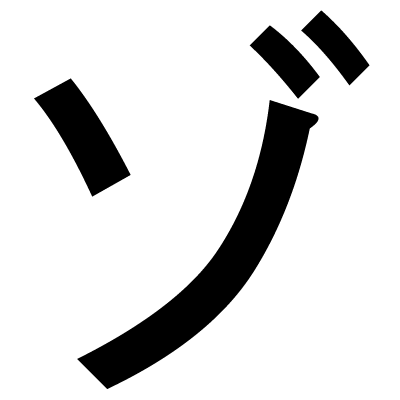
<style>
.page{position:relative;width:400px;height:400px;background:#ffffff}
.page>*{position:absolute;margin:0}
.t1{font:424.8px "MS-PGothic";color:#000000}
</style>
<div class="page">
<p class="t1" style="left:34px;top:10px;width:336px;height:379px">ゾ</p>
</div>
